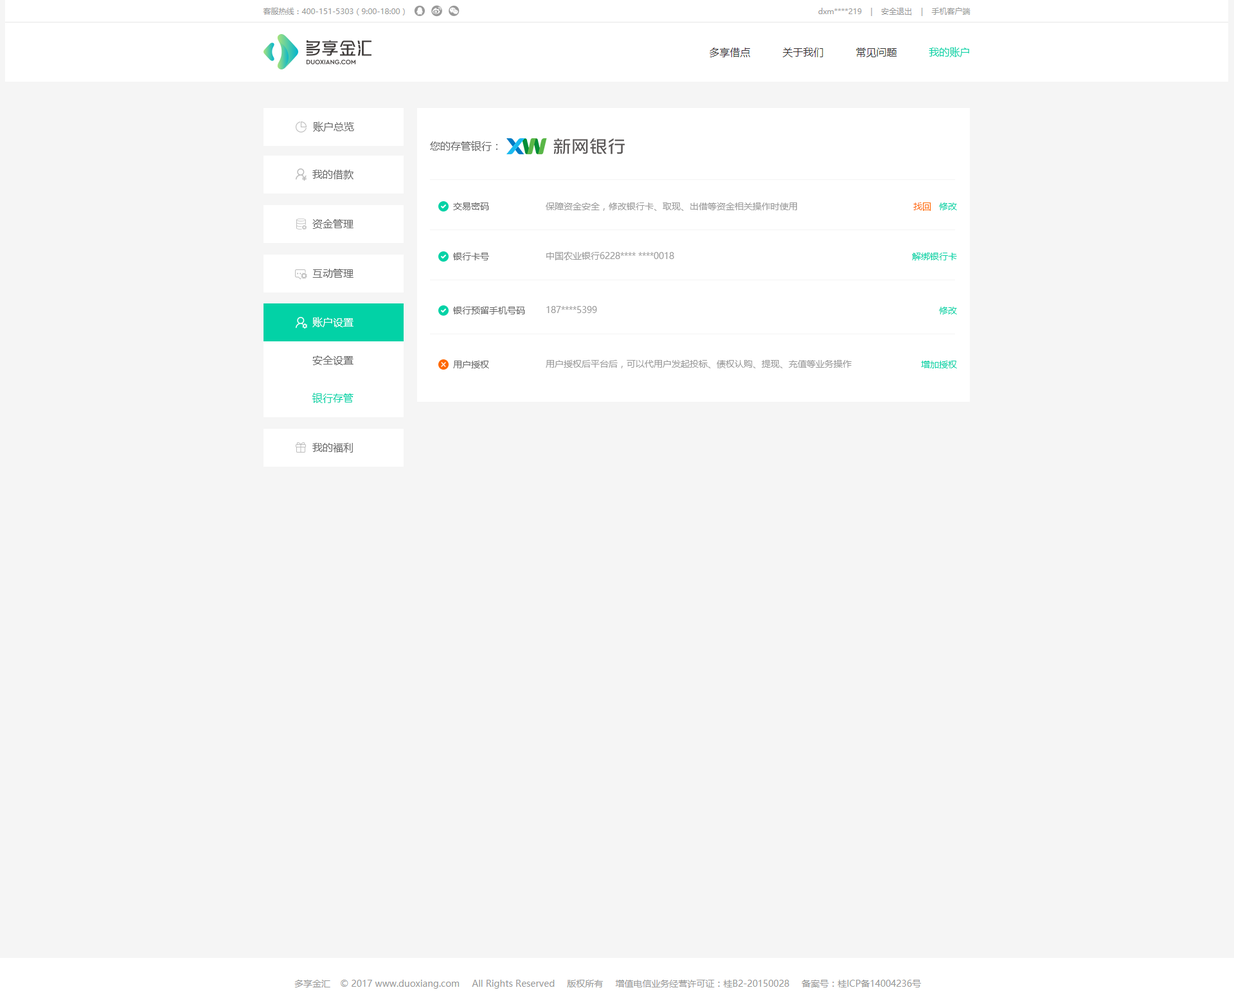
<style>
.page{position:relative;width:1234px;height:1008px;background:#f5f5f5}
.page>*{position:absolute;margin:0}
.t1{font:10.3px "MicrosoftYaHei";color:#02d2a6}
.t2{font:10.3px "MicrosoftYaHei";color:#666666}
.t3{font:9px "MicrosoftYaHei";color:#666666}
.t4{font:9px "MicrosoftYaHei";color:#999999}
.t5{font:9px "MicrosoftYaHei";color:#ff6800}
.t6{font:9px "MicrosoftYaHei";color:#02d2a6}
.t7{font:10.3px "MicrosoftYaHei";color:#ffffff}
</style>
<div class="page">
<p class="t1" style="left:929px;top:47px;width:40px;height:10px">我的账户</p>
<p class="t2" style="left:313px;top:122px;width:41px;height:10px">账户总览</p>
<p class="t2" style="left:430px;top:141px;width:68px;height:10px">您的存管银行：</p>
<p class="t2" style="left:312px;top:170px;width:42px;height:9px">我的借款</p>
<p class="t3" style="left:453px;top:203px;width:36px;height:7px">交易密码</p>
<p class="t4" style="left:546px;top:203px;width:251px;height:8px">保障资金安全，修改银行卡、取现、出借等资金相关操作时使用</p>
<p class="t5" style="left:914px;top:203px;width:17px;height:8px">找回</p>
<p class="t6" style="left:939px;top:203px;width:18px;height:7px">修改</p>
<p class="t2" style="left:312px;top:219px;width:42px;height:10px">资金管理</p>
<p class="t3" style="left:453px;top:253px;width:36px;height:7px">银行卡号</p>
<p class="t4" style="left:546px;top:251px;width:128px;height:9px">中国农业银行6228**** ****0018</p>
<p class="t6" style="left:912px;top:253px;width:45px;height:7px">解绑银行卡</p>
<p class="t2" style="left:312px;top:269px;width:42px;height:9px">互动管理</p>
<p class="t7" style="left:312px;top:317px;width:42px;height:10px">账户设置</p>
<p class="t3" style="left:453px;top:307px;width:72px;height:7px">银行预留手机号码</p>
<p class="t4" style="left:546px;top:306px;width:51px;height:7px">187****5399</p>
<p class="t6" style="left:939px;top:307px;width:18px;height:7px">修改</p>
<p class="t2" style="left:312px;top:356px;width:42px;height:9px">安全设置</p>
<p class="t3" style="left:453px;top:361px;width:36px;height:7px">用户授权</p>
<p class="t4" style="left:546px;top:360px;width:306px;height:8px">用户授权后平台后，可以代用户发起投标、债权认购、提现、充值等业务操作</p>
<p class="t6" style="left:921px;top:361px;width:36px;height:7px">增加授权</p>
<p class="t1" style="left:312px;top:393px;width:42px;height:10px">银行存管</p>
<p class="t2" style="left:312px;top:443px;width:41px;height:10px">我的福利</p>
</div>
